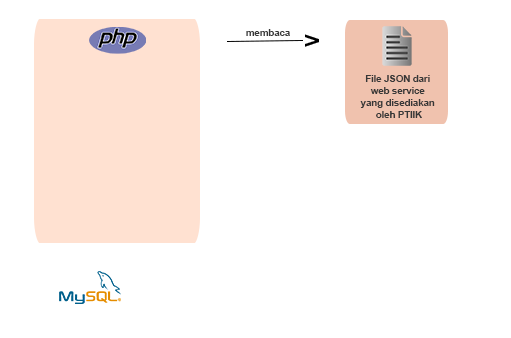
<style>
.page{position:relative;width:511px;height:338px;background:#ffffff}
.page>*{position:absolute;margin:0}
.t1{font:10px "Arial-BoldMT";letter-spacing:-0.025em;color:#373737}
</style>
<div class="page">
<p class="t1" style="left:246px;top:29px;width:44px;height:7px">membaca</p>
<p class="t1" style="left:360px;top:75px;width:75px;height:43px;text-align:center">File JSON dari <br>web service <br>yang disediakan <br>oleh PTIIK</p>
</div>
